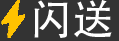
<style>
.page{position:relative;width:119px;height:41px;background:#333333}
.page>*{position:absolute;margin:0}
.t1{font:42px "AdobeHeitiStd-Regular";color:#ffffff}
</style>
<div class="page">
<p class="t1" style="left:34px;top:0px;width:78px;height:38px">闪送</p>
</div>
